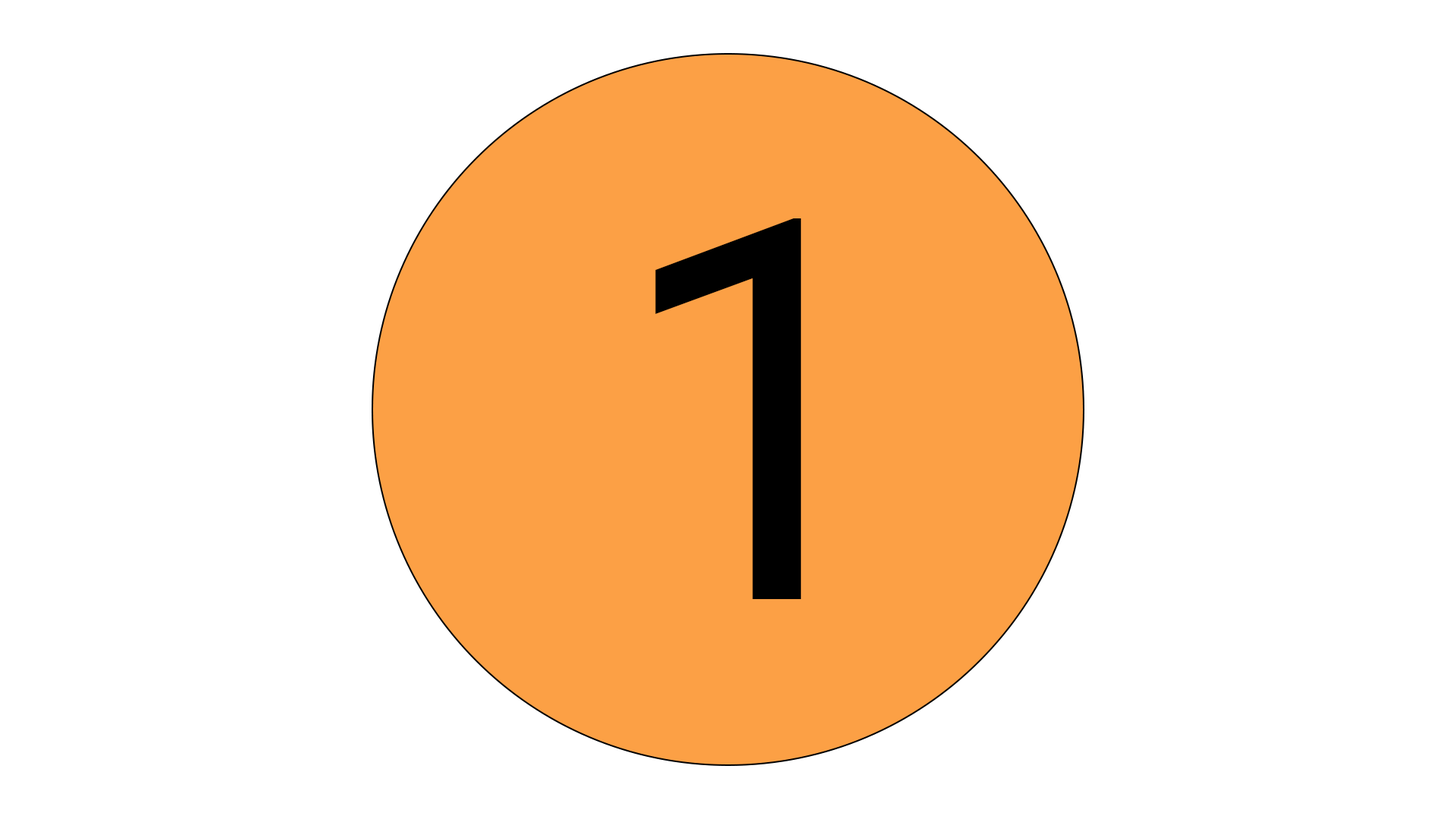
<style>
.page{position:relative;width:1456px;height:819px;background:#ffffff}
.page>*{position:absolute;margin:0}
.t1{font:533px "Roboto-Regular";color:#000000}
</style>
<div class="page">
<p class="t1" style="left:655px;top:218px;width:147px;height:381px">1</p>
</div>
